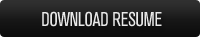
<style>
.page{position:relative;width:200px;height:37px}
.page>*{position:absolute;margin:0}
.t1{font:20px "AkzidenzGroteskBE-Cn";letter-spacing:-0.025em;color:#e9e9e9}
</style>
<div class="page">
<p class="t1" style="left:42px;top:11px;width:120px;height:16px">DOWNLOAD RESUME</p>
</div>
